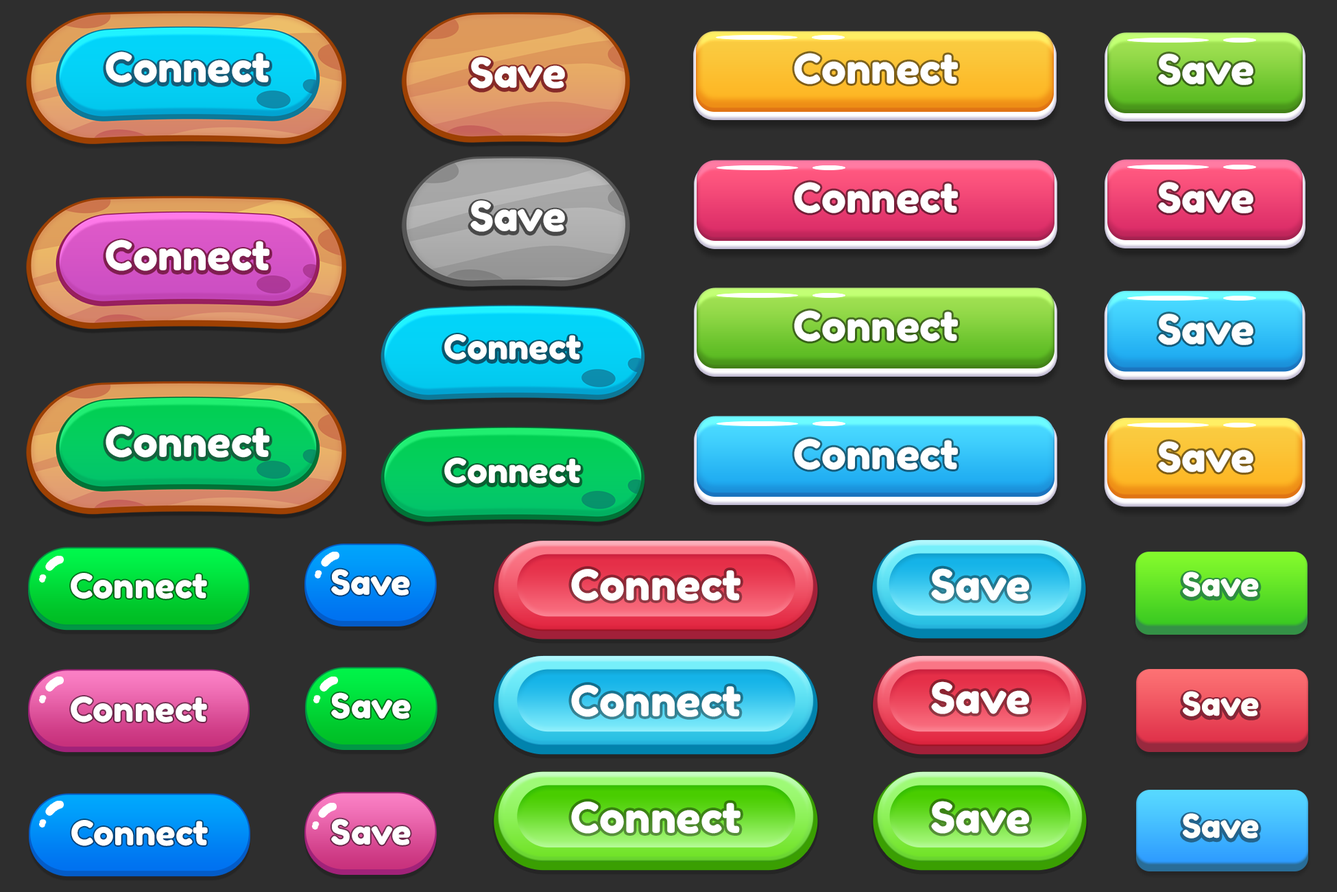
<style>
.page{position:relative;width:1337px;height:892px;background:#2e2e2e}
.page>*{position:absolute;margin:0}
.t1{font:41.2px "FredokaOne-Regular";color:#ffffff}
.t2{font:41.2px "FredokaOne-Regular";color:#fefefe}
.t3{font:34.3px "FredokaOne-Regular";color:#ffffff}
.t4{font:42.5px "FredokaOne-Regular";color:#ffffff}
.t5{font:32.9px "FredokaOne-Regular";color:#fffffb}
</style>
<div class="page">
<p class="t1" style="left:106px;top:51px;width:164px;height:32px">Connect</p>
<p class="t1" style="left:794px;top:53px;width:164px;height:31px">Connect</p>
<p class="t2" style="left:1158px;top:53px;width:96px;height:32px">Save</p>
<p class="t1" style="left:470px;top:57px;width:95px;height:31px">Save</p>
<p class="t1" style="left:794px;top:182px;width:164px;height:31px">Connect</p>
<p class="t2" style="left:1158px;top:182px;width:96px;height:31px">Save</p>
<p class="t1" style="left:470px;top:200px;width:95px;height:32px">Save</p>
<p class="t1" style="left:106px;top:239px;width:164px;height:32px">Connect</p>
<p class="t1" style="left:794px;top:310px;width:164px;height:32px">Connect</p>
<p class="t2" style="left:1158px;top:313px;width:96px;height:32px">Save</p>
<p class="t3" style="left:444px;top:334px;width:137px;height:26px">Connect</p>
<p class="t1" style="left:106px;top:426px;width:164px;height:31px">Connect</p>
<p class="t1" style="left:794px;top:438px;width:164px;height:32px">Connect</p>
<p class="t2" style="left:1158px;top:441px;width:96px;height:32px">Save</p>
<p class="t3" style="left:444px;top:457px;width:137px;height:27px">Connect</p>
<p class="t3" style="left:331px;top:569px;width:79px;height:26px">Save</p>
<p class="t4" style="left:571px;top:569px;width:170px;height:32px">Connect</p>
<p class="t4" style="left:931px;top:568px;width:98px;height:33px">Save</p>
<p class="t3" style="left:71px;top:573px;width:136px;height:26px">Connect</p>
<p class="t5" style="left:1183px;top:571px;width:76px;height:26px">Save</p>
<p class="t4" style="left:571px;top:684px;width:170px;height:33px">Connect</p>
<p class="t4" style="left:931px;top:681px;width:98px;height:33px">Save</p>
<p class="t3" style="left:71px;top:696px;width:136px;height:26px">Connect</p>
<p class="t3" style="left:331px;top:692px;width:80px;height:27px">Save</p>
<p class="t5" style="left:1183px;top:691px;width:76px;height:25px">Save</p>
<p class="t4" style="left:571px;top:801px;width:170px;height:32px">Connect</p>
<p class="t4" style="left:931px;top:800px;width:98px;height:33px">Save</p>
<p class="t3" style="left:71px;top:820px;width:137px;height:26px">Connect</p>
<p class="t3" style="left:331px;top:818px;width:80px;height:27px">Save</p>
<p class="t5" style="left:1183px;top:813px;width:76px;height:25px">Save</p>
</div>
